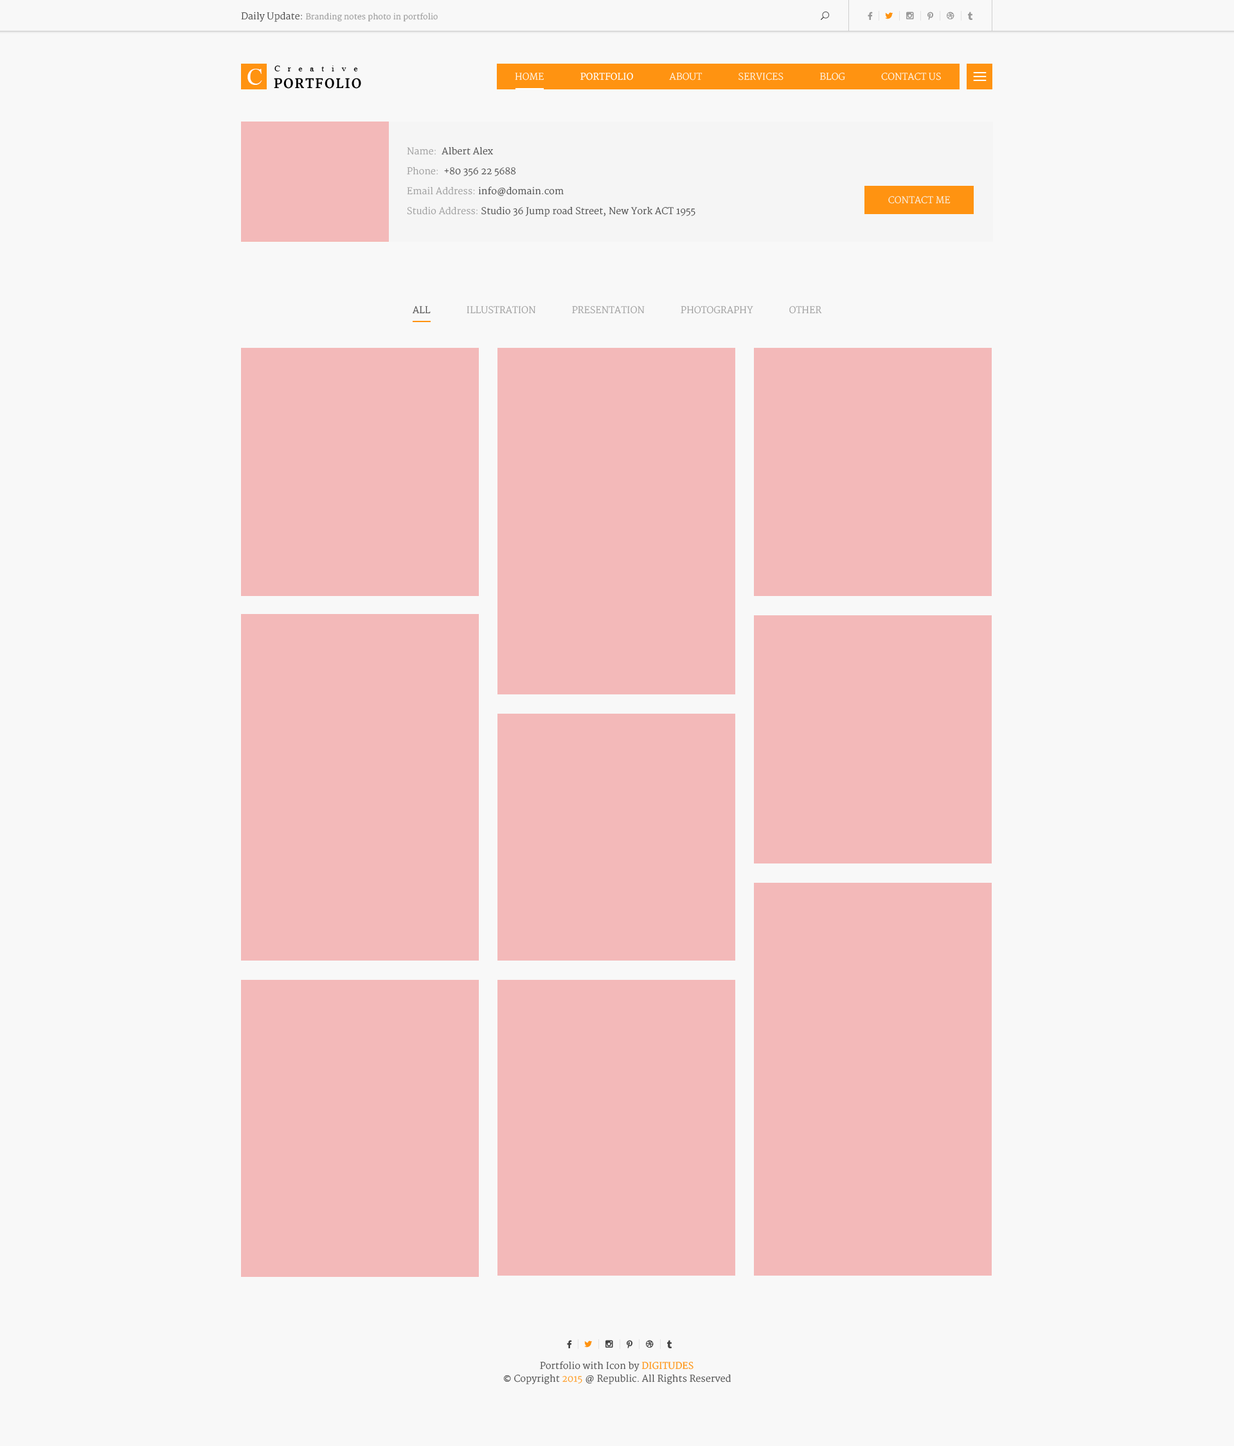
<style>
.page{position:relative;width:1234px;height:1446px;background:#f8f8f8}
.page>*{position:absolute;margin:0}
.t1{font:7.7px "Merriweather-Light";letter-spacing:0.012em;color:#999999}
.t2{font:9px "Merriweather-Light";letter-spacing:0.012em;color:#424242}
.t3{font:12.9px "MicrosoftHimalaya";letter-spacing:0.6em;color:#000000}
.t4{font:23.6px "IskoolaPota";letter-spacing:0.012em;color:#ffffff;text-transform:uppercase}
.t5{font:12.9px "Merriweather-Bold";letter-spacing:0.1em;color:#000000;text-transform:uppercase}
.t6{font:9px "Merriweather-Light";letter-spacing:0.012em;color:#ffffff;text-transform:uppercase}
.t7{font:9px "Merriweather";letter-spacing:0.012em;color:#ffffff;text-transform:uppercase}
.t8{font:9px/19.9px "Merriweather-Light";letter-spacing:0.012em;color:#424242}
.t9{font:9px/19.9px "Merriweather-Light";letter-spacing:0.012em;color:#999999}
.t10{font:9px/19.9px "Merriweather-Light";letter-spacing:0.012em;color:#ffffff}
.t11{font:9px "Merriweather-Light";letter-spacing:0.012em;color:#f8f8f8;text-transform:uppercase}
.t12{font:9px "Merriweather-Light";letter-spacing:0.012em;color:#999999;text-transform:uppercase}
.t13{font:9px "Merriweather-Light";letter-spacing:0.012em;color:#424242;text-transform:uppercase}
.t14{font:9px "Merriweather";letter-spacing:0.012em;color:#ff9311;text-transform:uppercase}
.t15{font:9px "MicrosoftNewTaiLue";letter-spacing:0.012em;color:#424242}
.t16{font:9px "Merriweather-Light";letter-spacing:0.012em;color:#ff9311}
</style>
<div class="page">
<p class="t1" style="left:241px;top:12px;width:197px;height:10px"><span class="t2">Daily Update: </span>Branding notes photo in portfolio</p>
<p class="t3" style="left:274px;top:66px;width:84px;height:5px">Creative</p>
<p class="t4" style="left:248px;top:69px;width:14px;height:16px">C</p>
<p class="t5" style="left:274px;top:78px;width:87px;height:11px">Portfolio</p>
<p class="t6" style="left:515px;top:73px;width:426px;height:7px">Home               <span class="t7">Portfolio</span>               About               Services               Blog               Contact Us</p>
<p class="t8" style="left:407px;top:147px;width:291px;height:70px"><span class="t9">Name:</span>  Albert Alex<br><span class="t9">Phone:  </span>+80 356 22 5688<br><span class="t9">Email Address: </span>info@domain.com<br><span class="t9">Studio Address: </span>Studio 36 Jump road Street, New York ACT 1955<span class="t10">.</span></p>
<p class="t11" style="left:888px;top:196px;width:63px;height:8px">Contact Me</p>
<p class="t12" style="left:412px;top:306px;width:410px;height:8px"><span class="t13">All</span>               Illustration               Presentation               Photography               Other</p>
<p class="t2" style="left:540px;top:1361px;width:154px;height:10px">Portfolio with Icon by <span class="t14">Digitudes</span></p>
<p class="t2" style="left:504px;top:1374px;width:135px;height:10px"><span class="t15">© </span>Copyright <span class="t16">2015</span> @ Republic.</p>
<p class="t2" style="left:642px;top:1374px;width:89px;height:10px">All Rights Reserved</p>
</div>
